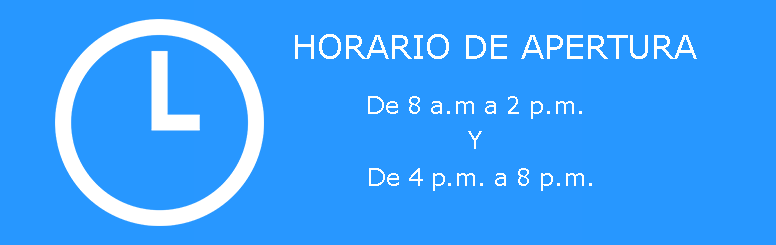
<style>
.page{position:relative;width:776px;height:245px;background:#2797ff}
.page>*{position:absolute;margin:0}
.t1{font:33px "Verdana";color:#ffffff}
.t2{font:24px "Verdana";color:#ffffff}
</style>
<div class="page">
<p class="t1" style="left:295px;top:34px;width:402px;height:25px">HORARIO DE APERTURA</p>
<p class="t2" style="left:368px;top:96px;width:214px;height:23px">De 8 a.m a 2 p.m.</p>
<p class="t2" style="left:468px;top:131px;width:14px;height:18px">Y</p>
<p class="t2" style="left:369px;top:168px;width:223px;height:23px">De 4 p.m. a 8 p.m.</p>
</div>
